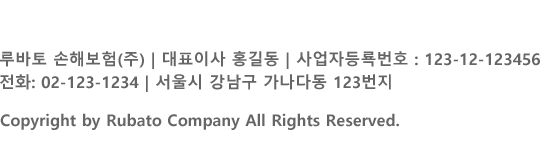
<style>
.page{position:relative;width:550px;height:150px;background:#ffffff}
.page>*{position:absolute;margin:0}
.t1{font:16px/23px "MalgunGothicBold";letter-spacing:0.005em;color:#656565}
.t2{font:16px "MalgunGothicBold";letter-spacing:0.005em;color:#656565}
</style>
<div class="page">
<p class="t1" style="left:0px;top:51px;width:540px;height:41px">루바토 손해보험(주) | 대표이사 홍길동 | 사업자등룍번호 : 123-12-123456<br>전화: 02-123-1234 | 서울시 강남구 가나다동 123번지</p>
<p class="t2" style="left:0px;top:113px;width:399px;height:17px">Copyright by Rubato Company All Rights Reserved.</p>
</div>
